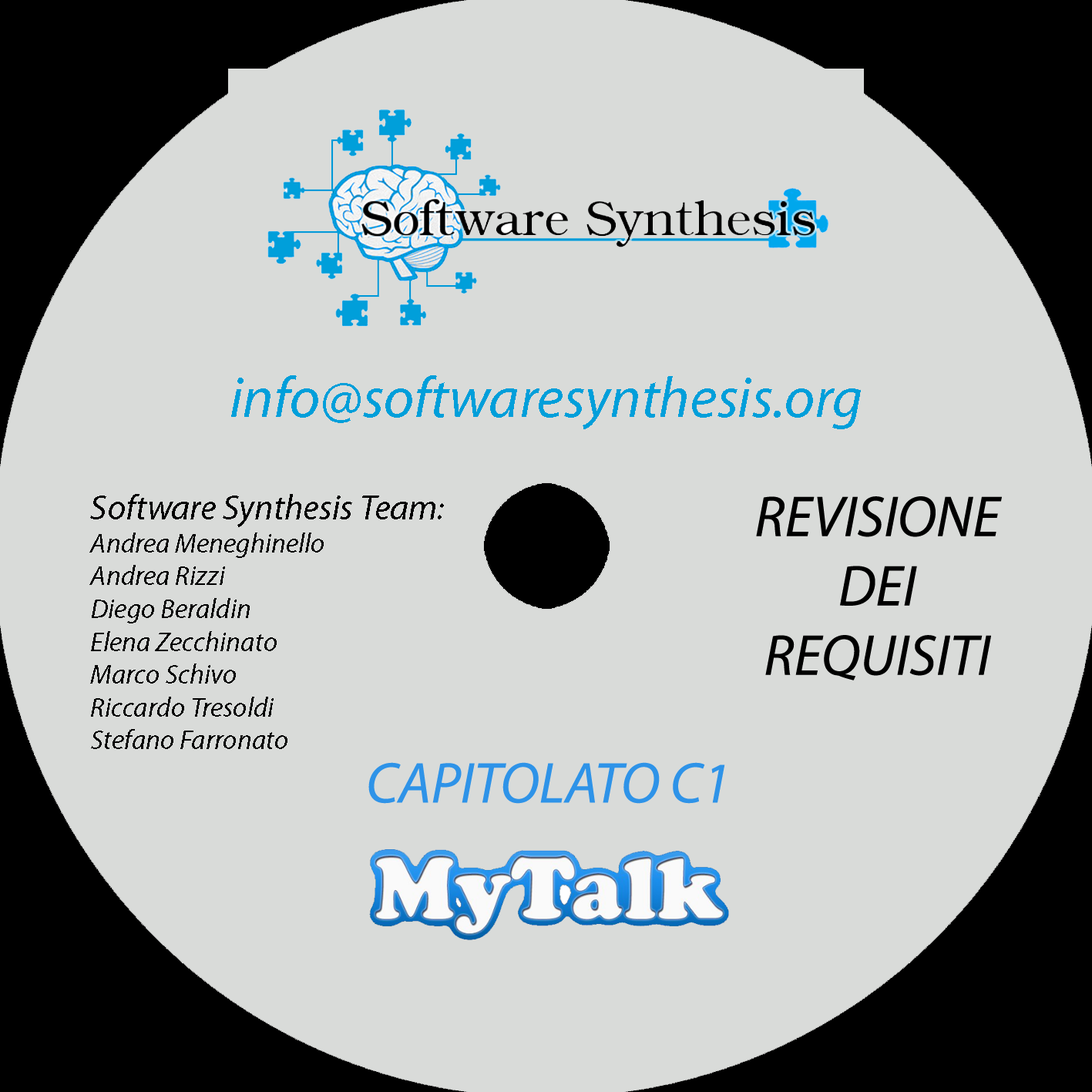
<style>
.page{position:relative;width:1092px;height:1092px;background:#d9dbd9}
.page>*{position:absolute;margin:0}
.t1{font:57.8px "MyriadPro-It";color:#009fda}
.t2{font:27.4px "MyriadPro-It";color:#000000}
.t3{font:35.2px "MyriadPro-It";color:#000000}
.t4{font:57.8px "MyriadPro-It";color:#000000}
.t5{font:57.8px "MyriadPro-It";color:#2e93e8}
</style>
<div class="page">
<p class="t1" style="left:231px;top:375px;width:630px;height:54px">info@softwaresynthesis.org</p>
<p class="t2" style="left:89px;top:494px;width:355px;height:255px"><span class="t3">Software Synthesis Team:<br></span>Andrea Meneghinello<br>Andrea Rizzi<br>Diego Beraldin<br>Elena Zecchinato<br>Marco Schivo<br>Riccardo Tresoldi<br>Stefano Farronato</p>
<p class="t4" style="left:756px;top:496px;width:246px;height:184px;text-align:center">REVISIONE<br>DEI<br>REQUISITI</p>
<p class="t5" style="left:368px;top:762px;width:357px;height:42px">CAPITOLATO C1</p>
</div>
